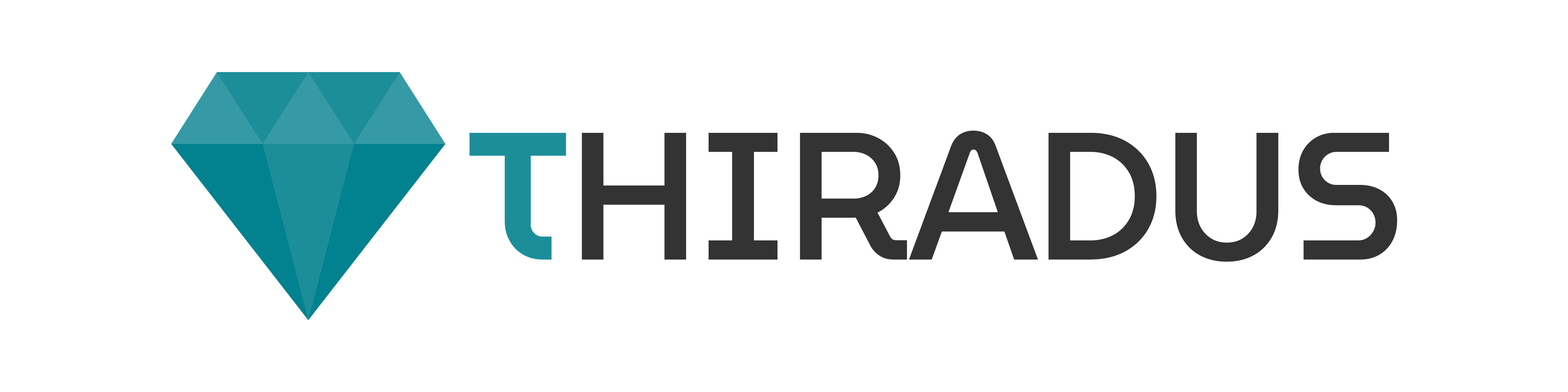
<style>
.page{position:relative;width:1568px;height:392px;background:#ffffff}
.page>*{position:absolute;margin:0}
.t1{font:258.4px "MuseoModerno-Medium";color:#333333;font-variant:small-caps}
.t2{font:258.4px "MuseoModerno-SemiBold";color:#1b8e9a;font-variant:small-caps}
</style>
<div class="page">
<p class="t1" style="left:469px;top:131px;width:928px;height:131px"><span class="t2">t</span>hiradus</p>
</div>
